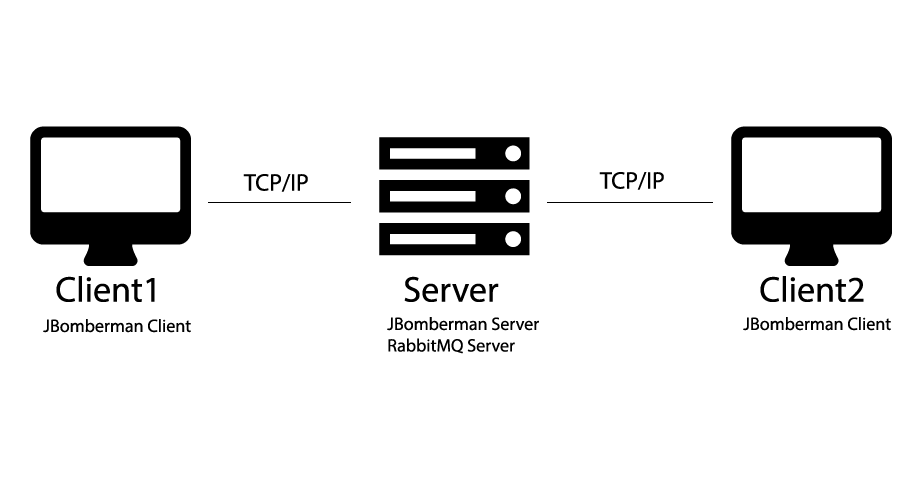
<style>
.page{position:relative;width:900px;height:500px;background:#ffffff}
.page>*{position:absolute;margin:0}
.t1{font:24px "MyriadPro-Regular";color:#000000}
.t2{font:36px "MyriadPro-Regular";color:#000000}
.t3{font:18px "MyriadPro-Regular";color:#000000}
</style>
<div class="page">
<p class="t1" style="left:243px;top:174px;width:65px;height:18px">TCP/IP</p>
<p class="t1" style="left:599px;top:172px;width:65px;height:18px">TCP/IP</p>
<p class="t2" style="left:56px;top:276px;width:99px;height:26px">Client1</p>
<p class="t2" style="left:404px;top:276px;width:95px;height:26px">Server</p>
<p class="t2" style="left:760px;top:276px;width:104px;height:26px">Client2</p>
<p class="t3" style="left:387px;top:317px;width:152px;height:37px">JBomberman Server<br>RabbitMQ Server</p>
<p class="t3" style="left:743px;top:317px;width:148px;height:14px">JBomberman Client</p>
<p class="t3" style="left:43px;top:319px;width:148px;height:14px">JBomberman Client</p>
</div>
